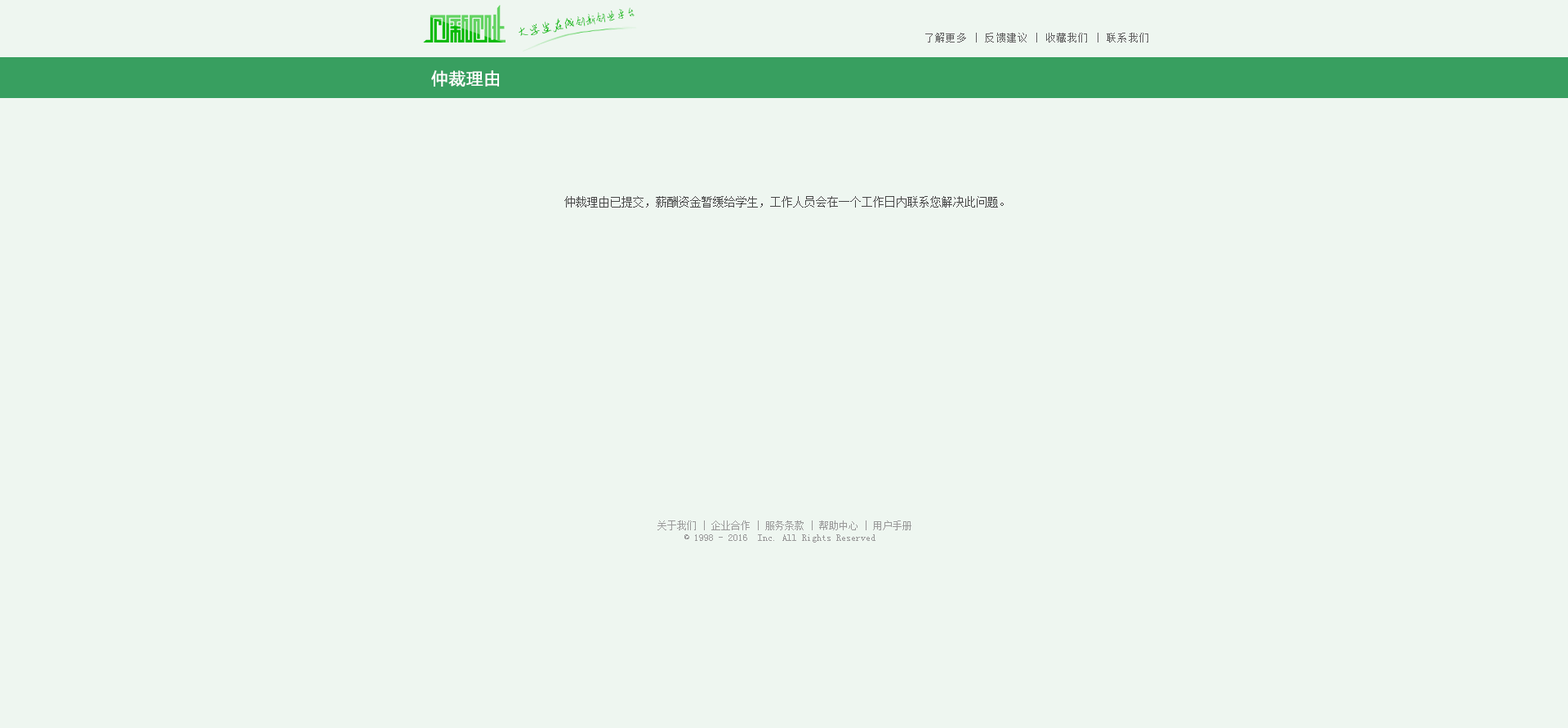
<style>
.page{position:relative;width:1568px;height:728px;background:#eef6f0}
.page>*{position:absolute;margin:0}
.t1{font:11.2px "AnJingCheng-Xing-2.0";letter-spacing:-0.01em;color:#09ba08}
.t2{font:12.6px "AnJingCheng-Xing-2.0";letter-spacing:-0.01em;color:#09ba08}
.t3{font:9.8px "SimSun";letter-spacing:0.1em;color:#606060}
.t4{font:16.3px "MicrosoftYaHei";letter-spacing:0.025em;color:#ffffff;font-weight:bold}
.t5{font:11.4px "SimSun";color:#474747}
.t6{font:9.8px "SimSun";color:#999999}
</style>
<div class="page">
<p class="t1" style="left:519px;top:7px;width:116px;height:29px;rotate:-10deg"><span class="t2">大学生在线</span>创新创业平台</p>
<p class="t3" style="left:925px;top:33px;width:223px;height:9px">了解更多 | 反馈建议 | 收藏我们 | 联系我们</p>
<p class="t4" style="left:431px;top:70px;width:68px;height:17px">仲裁理由</p>
<p class="t5" style="left:564px;top:196px;width:440px;height:11px">仲裁理由已提交，薪酬资金暂缓给学生，工作人员会在一个工作日内联系您解决此问题。</p>
<p class="t6" style="left:657px;top:520px;width:254px;height:22px;text-align:center">关于我们 | 企业合作 | 服务条款 | 帮助中心 | 用户手册<br>© 1998 - 2016  Inc. All Rights Reserved</p>
</div>
